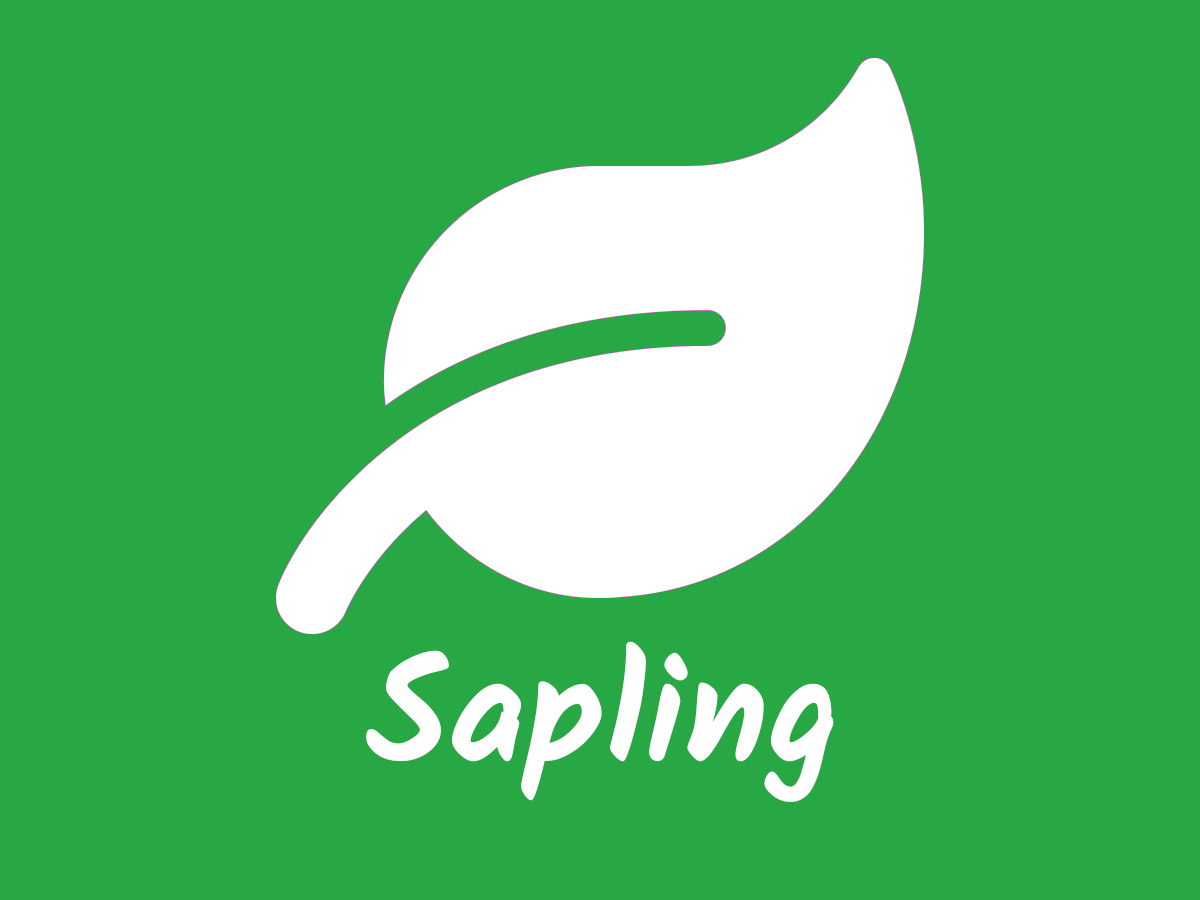
<style>
.page{position:relative;width:1200px;height:900px;background:#28a745}
.page>*{position:absolute;margin:0}
.t1{font:150px "Kalam-Bold";color:#fffefe}
</style>
<div class="page">
<p class="t1" style="left:366px;top:641px;width:468px;height:161px">Sapling</p>
</div>
